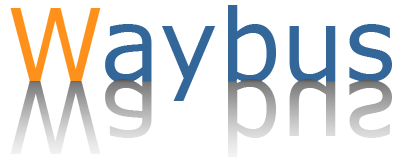
<style>
.page{position:relative;width:402px;height:165px;background:#ffffff}
.page>*{position:absolute;margin:0}
.t1{font:100px "MSReferenceSansSerif";color:#336699}
.t2{font:100px "MSReferenceSansSerif";color:#fe911c}
</style>
<div class="page">
<p class="t1" style="left:10px;top:5px;width:382px;height:96px"><span class="t2">W</span>aybus</p>
</div>
